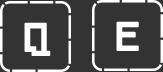
<style>
.page{position:relative;width:163px;height:72px;background:#333333}
.page>*{position:absolute;margin:0}
.t1{font:37px "PixelSplitter-Bold";color:#ffffff}
</style>
<div class="page">
<p class="t1" style="left:24px;top:22px;width:27px;height:34px">Q</p>
<p class="t1" style="left:116px;top:21px;width:23px;height:30px">E</p>
</div>
